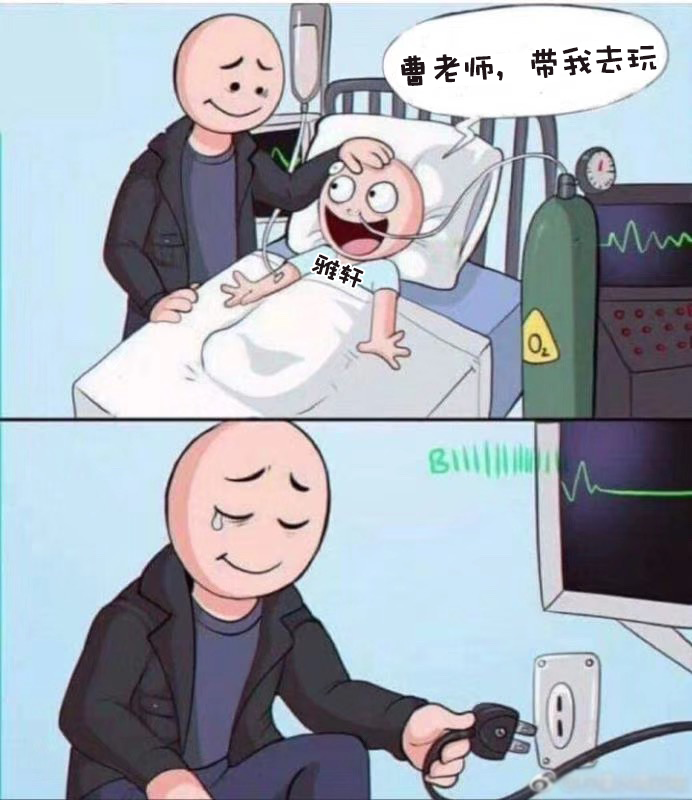
<style>
.page{position:relative;width:692px;height:800px}
.page>*{position:absolute;margin:0}
.t1{font:34.5px "DFWaWaSC-W5";letter-spacing:-0.08em;color:#1e1417;font-weight:bold}
.t2{font:28px "DFWaWaSC-W5";letter-spacing:-0.08em;color:#1e1417;font-weight:bold}
</style>
<div class="page">
<p class="t1" style="left:401px;top:45px;width:256px;height:41px;rotate:-3deg">曹老师，带我去玩</p>
<p class="t2" style="left:311px;top:254px;width:53px;height:34px;rotate:20deg">雅轩</p>
</div>
